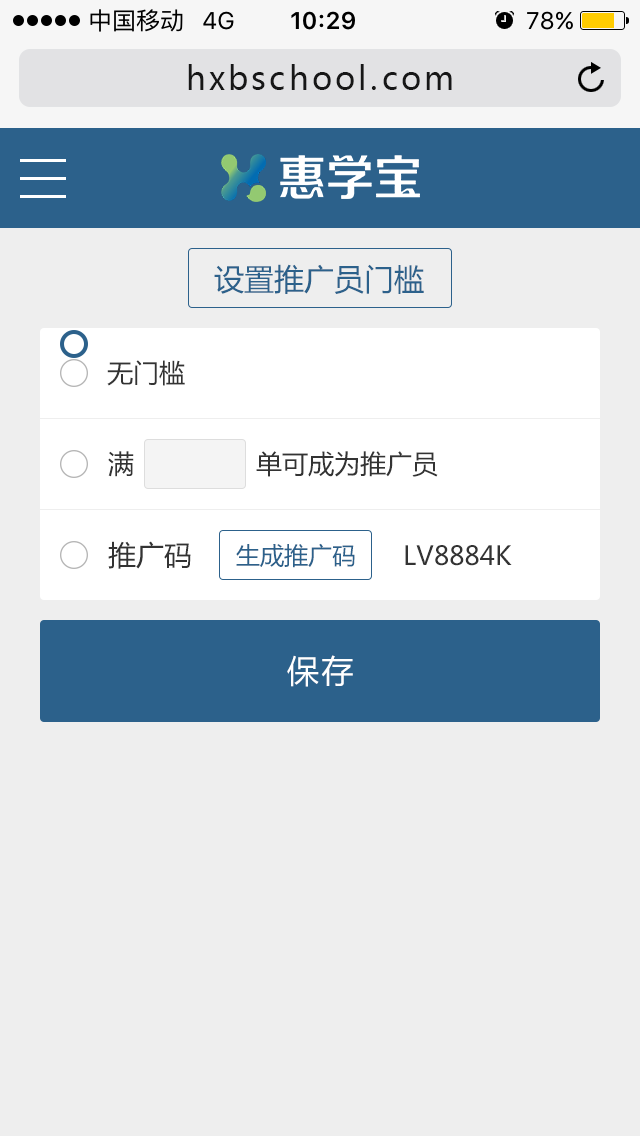
<style>
.page{position:relative;width:640px;height:1136px;background:#eeeeee}
.page>*{position:absolute;margin:0}
.t1{font:32px "MicrosoftYaHei";letter-spacing:0.1em;color:#171717}
.t2{font:30px "MicrosoftYaHei";color:#2c618b}
.t3{font:26px "MicrosoftYaHei";color:#333333}
.t4{font:28px "MicrosoftYaHei";color:#333333}
.t5{font:24px "MicrosoftYaHei";color:#2c618b}
.t6{font:32px "MicrosoftYaHei";letter-spacing:0.075em;color:#ffffff}
</style>
<div class="page">
<p class="t1" style="left:188px;top:64px;width:264px;height:26px">hxbschool.com</p>
<p class="t2" style="left:214px;top:264px;width:210px;height:30px">设置推广员门槛</p>
<p class="t3" style="left:107px;top:360px;width:78px;height:26px">无门槛</p>
<p class="t3" style="left:108px;top:451px;width:26px;height:26px">满</p>
<p class="t3" style="left:256px;top:451px;width:182px;height:26px">单可成为推广员</p>
<p class="t4" style="left:108px;top:541px;width:83px;height:28px">推广码</p>
<p class="t5" style="left:236px;top:543px;width:119px;height:25px">生成推广码</p>
<p class="t3" style="left:405px;top:545px;width:107px;height:21px">LV8884K</p>
<p class="t6" style="left:287px;top:655px;width:66px;height:32px">保存</p>
</div>
